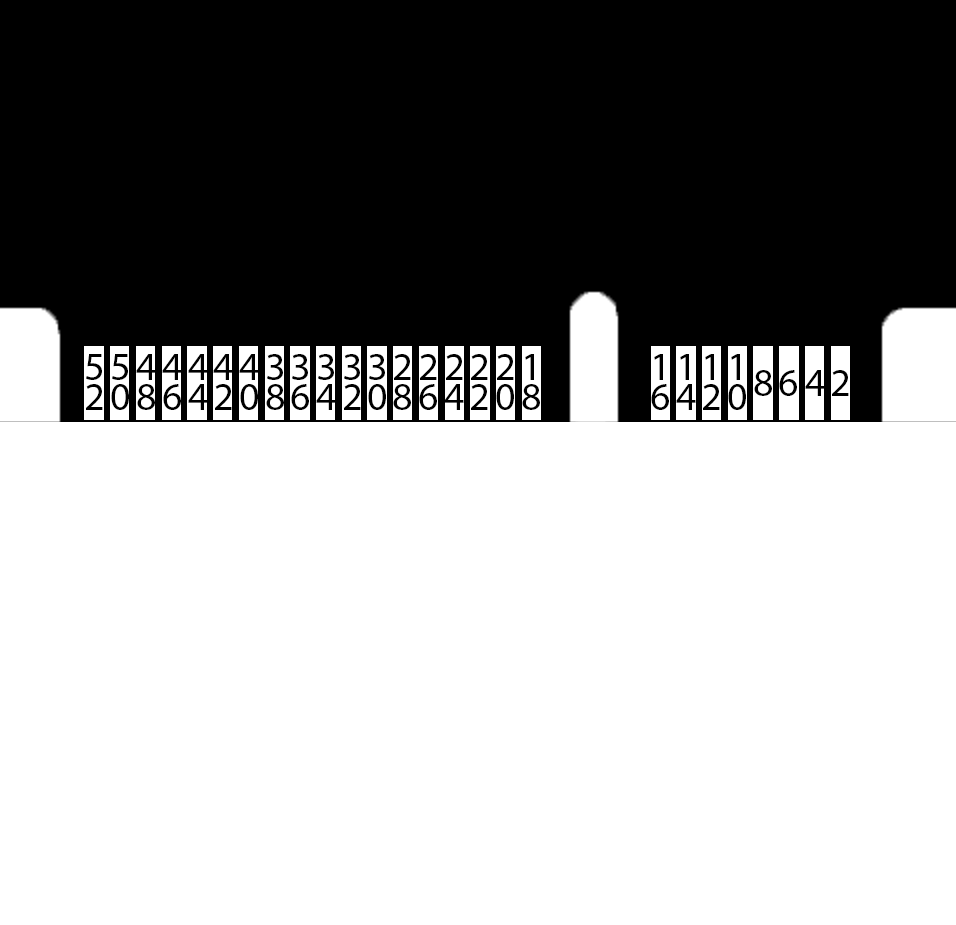
<style>
.page{position:relative;width:956px;height:925px;background:#ffffff}
.page>*{position:absolute;margin:0}
.t1{font:40px/30px "MyriadPro-Regular";color:#000000}
.t2{font:40px "MyriadPro-Regular";color:#000000}
</style>
<div class="page">
<p class="t1" style="left:86px;top:354px;width:17px;height:56px">5<br>2</p>
<p class="t1" style="left:111px;top:354px;width:18px;height:56px">5<br>0</p>
<p class="t1" style="left:136px;top:354px;width:20px;height:56px">4<br>8</p>
<p class="t1" style="left:162px;top:354px;width:20px;height:56px">4<br>6</p>
<p class="t1" style="left:188px;top:354px;width:20px;height:56px">4<br>4</p>
<p class="t1" style="left:213px;top:354px;width:20px;height:56px">4<br>2</p>
<p class="t1" style="left:239px;top:354px;width:20px;height:56px">4<br>0</p>
<p class="t1" style="left:266px;top:354px;width:18px;height:56px">3<br>8</p>
<p class="t1" style="left:291px;top:354px;width:18px;height:56px">3<br>6</p>
<p class="t1" style="left:316px;top:354px;width:20px;height:56px">3<br>4</p>
<p class="t1" style="left:344px;top:354px;width:17px;height:56px">3<br>2</p>
<p class="t1" style="left:368px;top:354px;width:18px;height:56px">3<br>0</p>
<p class="t1" style="left:393px;top:354px;width:18px;height:56px">2<br>8</p>
<p class="t1" style="left:419px;top:354px;width:18px;height:56px">2<br>6</p>
<p class="t1" style="left:444px;top:354px;width:20px;height:56px">2<br>4</p>
<p class="t1" style="left:471px;top:354px;width:17px;height:56px">2<br>2</p>
<p class="t1" style="left:496px;top:354px;width:18px;height:56px">2<br>0</p>
<p class="t1" style="left:522px;top:354px;width:18px;height:56px">1<br>8</p>
<p class="t1" style="left:651px;top:354px;width:18px;height:56px">1<br>6</p>
<p class="t1" style="left:676px;top:354px;width:20px;height:56px">1<br>4</p>
<p class="t1" style="left:703px;top:354px;width:17px;height:56px">1<br>2</p>
<p class="t1" style="left:728px;top:354px;width:18px;height:56px">1<br>0</p>
<p class="t2" style="left:754px;top:370px;width:18px;height:26px">8</p>
<p class="t2" style="left:779px;top:370px;width:18px;height:26px">6</p>
<p class="t2" style="left:805px;top:370px;width:20px;height:26px">4</p>
<p class="t2" style="left:832px;top:370px;width:17px;height:26px">2</p>
</div>
